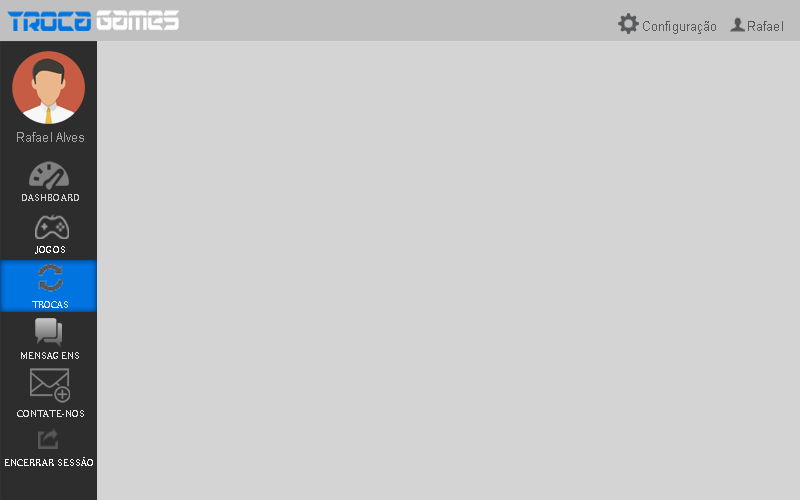
<style>
.page{position:relative;width:800px;height:500px;background:#d4d4d4}
.page>*{position:absolute;margin:0}
.t1{font:13px "ArialMT";letter-spacing:0.01em;color:#58595b;scale:0.92 1}
.t2{font:13px "ArialMT";letter-spacing:0.01em;color:#a3a4a5;scale:0.92 1}
.t3{font:9.9px "Century751BT-RomanNo2B";letter-spacing:0.01em;color:#d3d0d0;scale:0.92 1}
.t4{font:9.9px "Century751BT-RomanNo2B";letter-spacing:0.01em;color:#ffffff;scale:0.92 1}
.t5{font:9.9px "Century751BT-RomanNo2B";letter-spacing:0.01em;color:#e5e5e5;scale:0.92 1}
.t6{font:9.9px "Century751BT-RomanNo2B";letter-spacing:0.01em;color:#f6f6f6;scale:0.92 1}
</style>
<div class="page">
<p class="t1" style="left:643px;top:21px;width:73px;height:13px">Configuração</p>
<p class="t1" style="left:748px;top:21px;width:35px;height:10px">Rafael</p>
<p class="t2" style="left:17px;top:132px;width:67px;height:10px">Rafael Alves</p>
<p class="t3" style="left:22px;top:194px;width:57px;height:7px">DASHBOARD</p>
<p class="t4" style="left:35px;top:246px;width:30px;height:8px">JOGOS</p>
<p class="t5" style="left:32px;top:301px;width:36px;height:7px">TROCAS</p>
<p class="t5" style="left:21px;top:352px;width:58px;height:7px">MENSAGENS</p>
<p class="t5" style="left:17px;top:410px;width:67px;height:7px">CONTATE-NOS</p>
<p class="t6" style="left:5px;top:457px;width:88px;height:9px">ENCERRAR SESSÃO</p>
</div>
